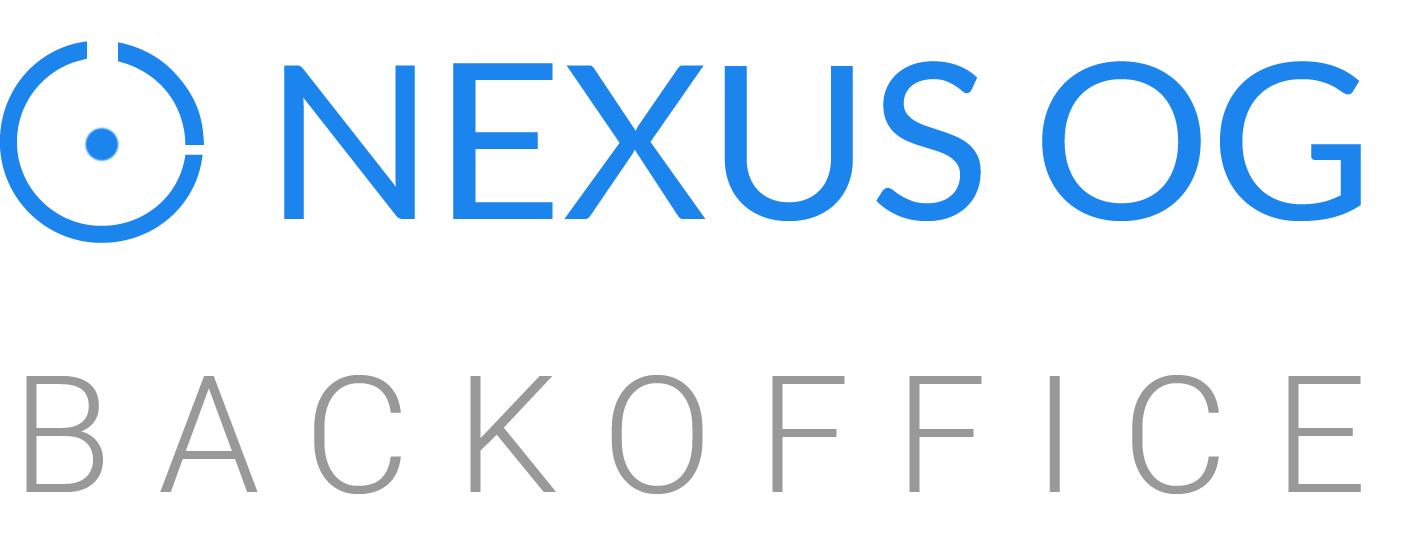
<style>
.page{position:relative;width:1412px;height:537px;background:#ffffff}
.page>*{position:absolute;margin:0}
.t1{font:218.9px "Lato-Regular";letter-spacing:-0.002em;color:#1b84ed}
</style>
<div class="page">
<p class="t1" style="left:284px;top:61px;width:1077px;height:160px">NEXUS OG</p>
</div>
